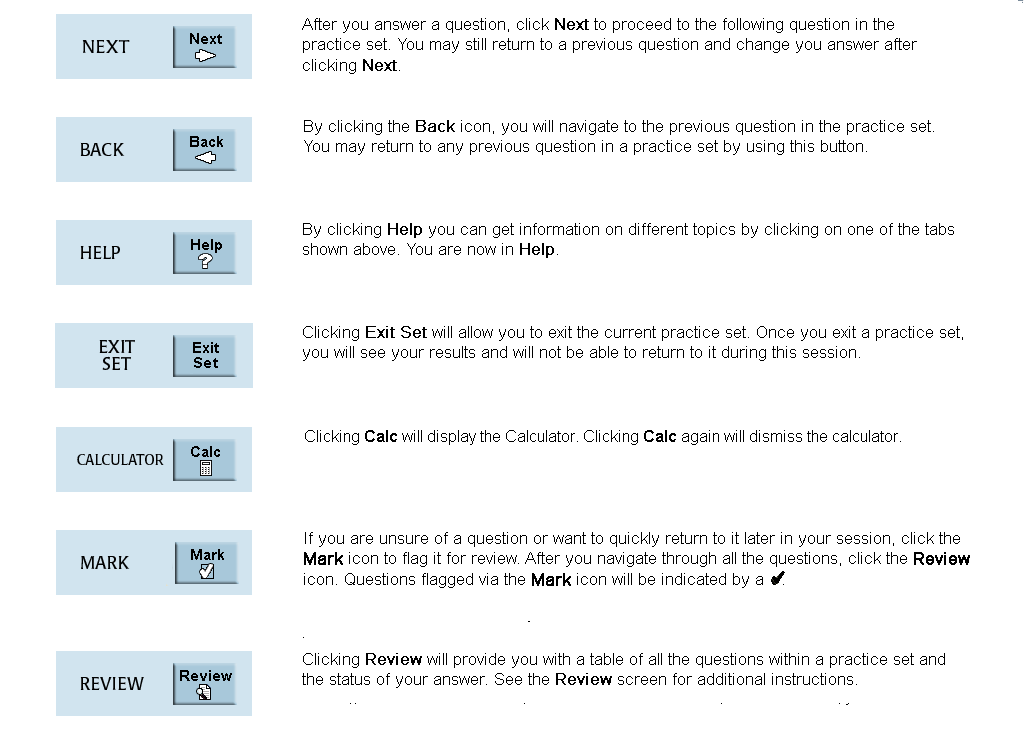
<style>
.page{position:relative;width:1024px;height:756px;background:#ffffff}
.page>*{position:absolute;margin:0}
.t1{font:17px "ArialMT";color:#000000}
.t2{font:16px "ArialMT";color:#000000;font-weight:bold}
.t3{font:17px "ArialMT";color:#000000;font-weight:bold}
</style>
<div class="page">
<p class="t1" style="left:302px;top:18px;width:615px;height:56px">After you answer a question, click <span class="t2">Next</span> to proceed to the following question in the <br>practice set. You may still return to a previous question and change you answer after <br>clicking <span class="t2">Next</span>.</p>
<p class="t1" style="left:304px;top:120px;width:630px;height:35px">By clicking the <span class="t2">Back</span> icon, you will navigate to the previous question in the practice set. <br>You may return to any previous question in a practice set by using this button.</p>
<p class="t1" style="left:303px;top:223px;width:651px;height:35px">By clicking <span class="t2">Help</span> you can get information on different topics by clicking on one of the tabs <br>shown above. You are now in <span class="t2">Help</span>.</p>
<p class="t1" style="left:303px;top:326px;width:660px;height:35px">Clicking <span class="t2">Exit Set</span> will allow you to exit the current practice set. Once you exit a practice set, <br>you will see your results and will not be able to return to it during this session.</p>
<p class="t1" style="left:304px;top:532px;width:666px;height:56px">If you are unsure of a question or want to quickly return to it later in your session, click the <br><span class="t3">Mark</span> icon to flag it for review. After you navigate through all the questions, click the <span class="t3">Review</span> <br>icon. Questions flagged via the <span class="t3">Mark</span> icon will be indicated by a</p>
<p class="t1" style="left:302px;top:653px;width:643px;height:35px">Clicking <span class="t2">Review</span> will provide you with a table of all the questions within a practice set and <br>the status of your answer. See the <span class="t2">Review</span> screen for additional instructions.</p>
</div>
